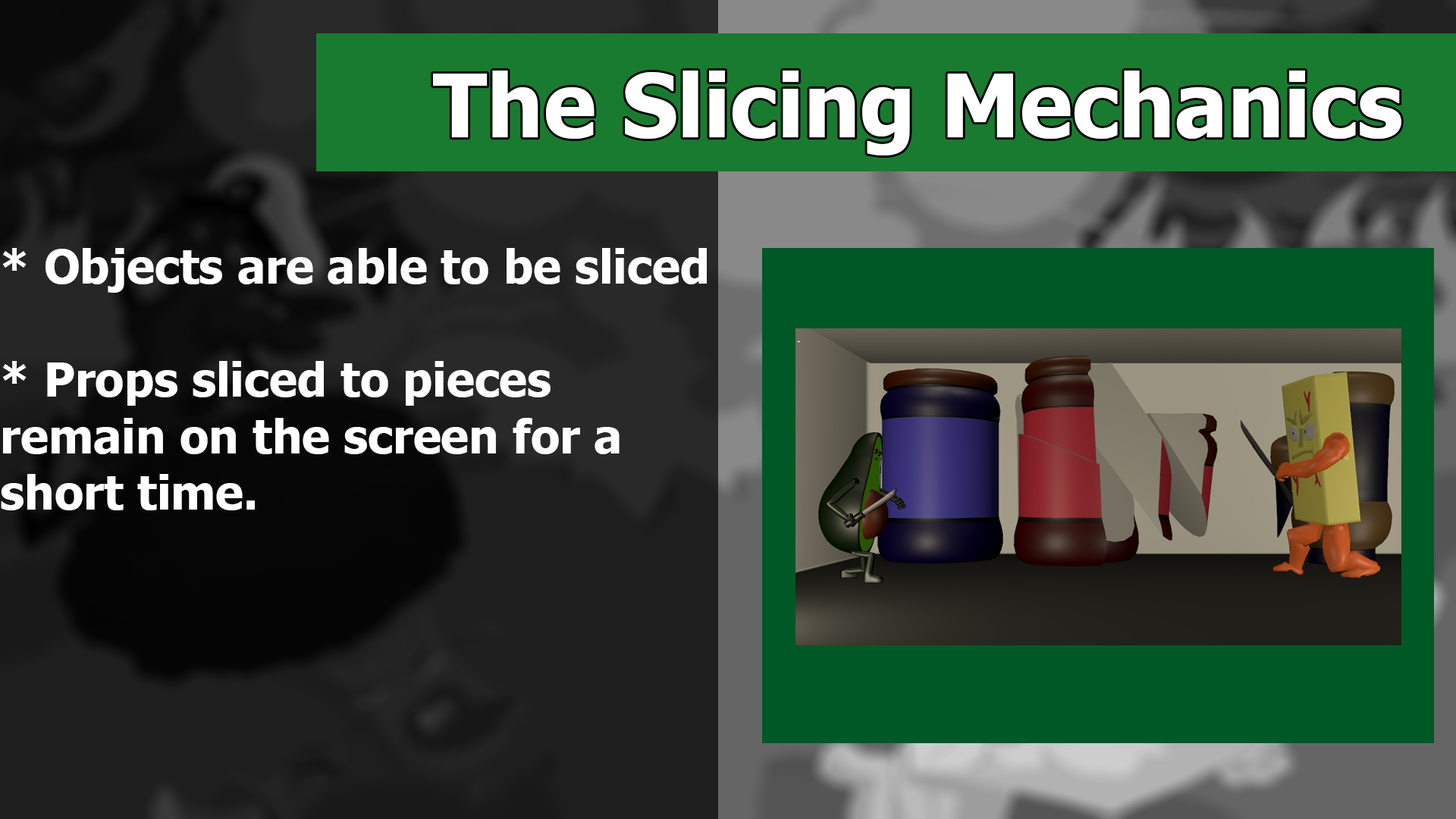
<style>
.page{position:relative;width:1456px;height:819px}
.page>*{position:absolute;margin:0}
.t1{font:88.1px "Tahoma-Bold";color:#ffffff}
.t2{font:47px "Tahoma-Bold";color:#ffffff}
</style>
<div class="page">
<p class="t1" style="left:433px;top:71px;width:968px;height:84px">The Slicing Mechanics</p>
<p class="t2" style="left:1px;top:248px;width:706px;height:262px">* Objects are able to be sliced<br><br>* Props sliced to pieces<br>remain on the screen for a<br>short time.</p>
</div>
